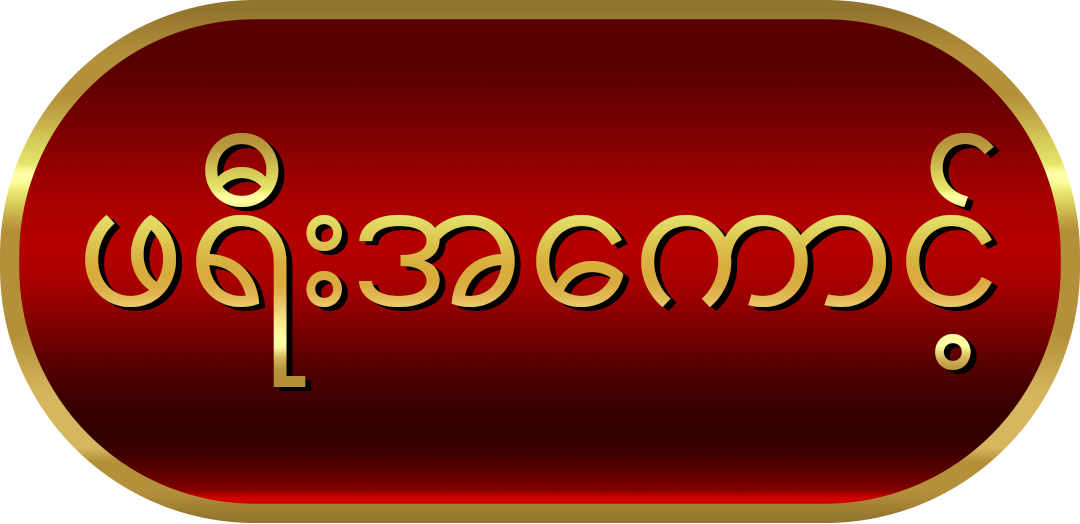
<style>
.page{position:relative;width:1080px;height:524px}
.page>*{position:absolute;margin:0}
.t1{font:175.3px "MyanmarText"}
</style>
<div class="page">
<p class="t1" style="left:85px;top:133px;width:909px;height:254px">ဖရီးအကောင့်</p>
</div>
